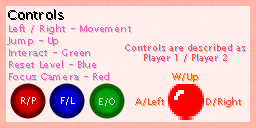
<style>
.page{position:relative;width:256px;height:128px;background:#ffeeeb}
.page>*{position:absolute;margin:0}
.t1{font:10px "LucidaSansUnicode";color:#f05ebe}
.t2{font:9px "LucidaSansUnicode";color:#ff5151}
.t3{font:9px "LucidaSansUnicode";color:#ffffff}
</style>
<div class="page">
<p class="t1" style="left:7px;top:24px;width:124px;height:56px">Left / Right - Movement<br>Jump - Up<br>Interact - Green<br>Reset Level - Blue<br>Focus Camera - Red</p>
<p class="t2" style="left:125px;top:44px;width:120px;height:19px;text-align:center">Controls are described as<br>Player 1 / Player 2</p>
<p class="t3" style="left:21px;top:97px;width:15px;height:8px">R/P</p>
<p class="t3" style="left:61px;top:97px;width:14px;height:8px">F/L</p>
<p class="t3" style="left:99px;top:98px;width:16px;height:8px">E/O</p>
</div>
